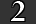
<style>
.page{position:relative;width:36px;height:24px;background:#333333}
.page>*{position:absolute;margin:0}
.t1{font:34px "Perpetua-Bold";color:#ffffff}
</style>
<div class="page">
<p class="t1" style="left:11px;top:1px;width:14px;height:20px">2</p>
</div>
